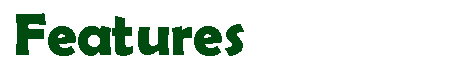
<style>
.page{position:relative;width:465px;height:74px;background:#ffffff}
.page>*{position:absolute;margin:0}
.t1{font:60px "BerlinSansFBDemi-Bold";color:#004b10}
</style>
<div class="page">
<p class="t1" style="left:16px;top:13px;width:228px;height:43px">Features</p>
</div>
